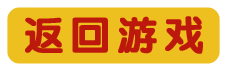
<style>
.page{position:relative;width:227px;height:71px;background:#edbf1f}
.page>*{position:absolute;margin:0}
.t1{font:40px "JCuYuan";letter-spacing:0.15em;color:#bc180c;font-weight:bold}
</style>
<div class="page">
<p class="t1" style="left:25px;top:16px;width:178px;height:38px">返回游戏</p>
</div>
